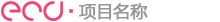
<style>
.page{position:relative;width:220px;height:22px;background:#ffffff}
.page>*{position:absolute;margin:0}
.t1{font:16.7px "MicrosoftYaHei";color:#979797;font-weight:bold}
</style>
<div class="page">
<p class="t1" style="left:78px;top:3px;width:70px;height:17px">项目名称</p>
</div>
